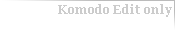
<style>
.page{position:relative;width:175px;height:30px;background:#ffffff}
.page>*{position:absolute;margin:0}
.t1{font:12px "Georgia-Bold";color:#cccccc}
</style>
<div class="page">
<p class="t1" style="left:58px;top:5px;width:115px;height:13px">Komodo Edit only</p>
</div>
